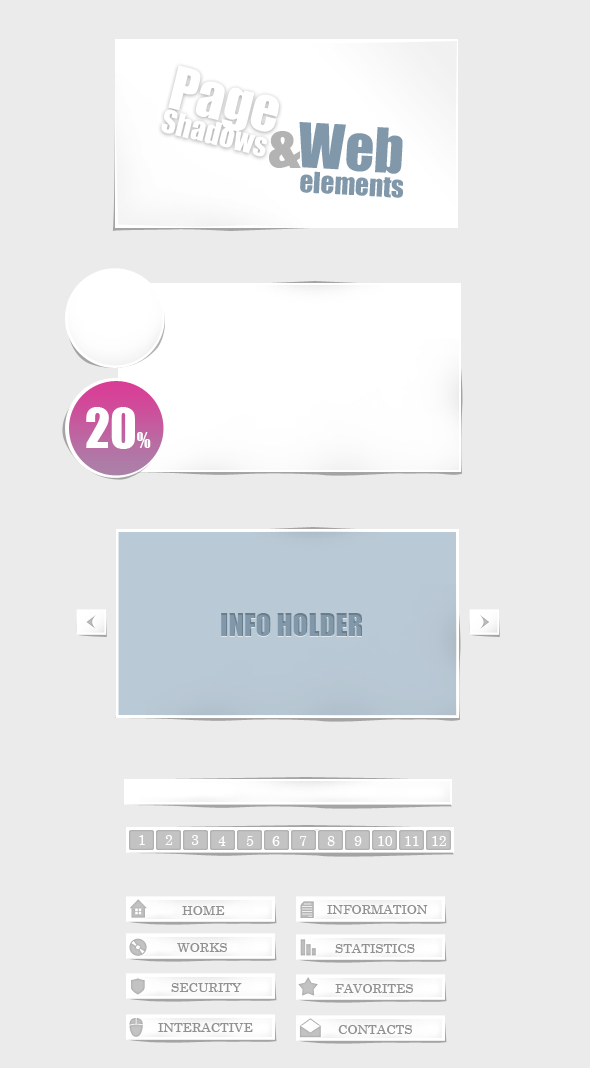
<style>
.page{position:relative;width:590px;height:1068px;background:#ebebeb}
.page>*{position:absolute;margin:0}
.t1{font:29px/24.5px "Impact";color:#ffffff}
.t2{font:55px/24.5px "Impact";color:#ffffff}
.t3{font:27px/24.5px "Impact";color:#8198aa}
.t4{font:27px/24.5px "Impact";color:#878787}
.t5{font:57px/24.5px "Impact";color:#8198aa}
.t6{font:57px "Impact";color:#b3b3b3}
.t7{font:50.2px "Impact";color:#ffffff}
.t8{font:19.9px "Impact";color:#ffffff}
.t9{font:29px "Impact";color:#8198aa}
.t10{font:14px "Century";color:#ffffff}
.t11{font:13px "Century";color:#919191}
</style>
<div class="page">
<p class="t1" style="left:161px;top:65px;width:118px;height:92px;text-align:center;rotate:14deg"><span class="t2">Page<br></span> Shadows</p>
<p class="t3" style="left:299px;top:122px;width:104px;height:76px;text-align:center;rotate:3deg"><span class="t4"><br> </span><span class="t5">Web</span> <br>elements</p>
<p class="t6" style="left:269px;top:131px;width:32px;height:37px">&amp;</p>
<p class="t7" style="left:86px;top:407px;width:65px;height:42px">20<span class="t8">%</span></p>
<p class="t9" style="left:221px;top:613px;width:141px;height:23px">INFO HOLDER</p>
<p class="t10" style="left:139px;top:835px;width:6px;height:10px">1</p>
<p class="t10" style="left:165px;top:835px;width:8px;height:10px">2</p>
<p class="t10" style="left:191px;top:835px;width:8px;height:10px">3</p>
<p class="t10" style="left:218px;top:836px;width:8px;height:10px">4</p>
<p class="t10" style="left:246px;top:836px;width:8px;height:10px">5</p>
<p class="t10" style="left:272px;top:836px;width:8px;height:10px">6</p>
<p class="t10" style="left:300px;top:836px;width:7px;height:10px">7</p>
<p class="t10" style="left:327px;top:836px;width:8px;height:10px">8</p>
<p class="t10" style="left:354px;top:836px;width:8px;height:10px">9</p>
<p class="t10" style="left:378px;top:836px;width:14px;height:10px">10</p>
<p class="t10" style="left:405px;top:836px;width:14px;height:10px">11</p>
<p class="t10" style="left:432px;top:836px;width:14px;height:10px">12</p>
<p class="t11" style="left:327px;top:905px;width:101px;height:9px">INFORMATION</p>
<p class="t11" style="left:182px;top:906px;width:43px;height:9px">HOME</p>
<p class="t11" style="left:177px;top:943px;width:50px;height:9px">WORKS</p>
<p class="t11" style="left:335px;top:944px;width:80px;height:9px">STATISTICS</p>
<p class="t11" style="left:171px;top:983px;width:71px;height:9px">SECURITY</p>
<p class="t11" style="left:335px;top:984px;width:78px;height:9px">FAVORITES</p>
<p class="t11" style="left:158px;top:1023px;width:95px;height:9px">INTERACTIVE</p>
<p class="t11" style="left:338px;top:1025px;width:74px;height:9px">CONTACTS</p>
</div>
